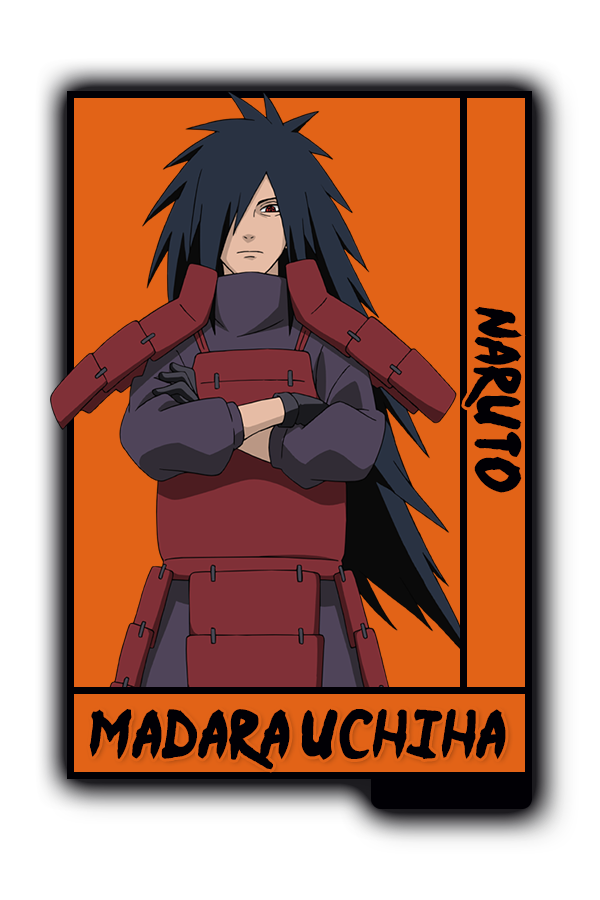
<style>
.page{position:relative;width:600px;height:900px;background:#e26317}
.page>*{position:absolute;margin:0}
.t1{font:52px "Ninja-Naruto";color:#010005}
.t2{font:55.4px "Ninja-Naruto";color:#010005}
</style>
<div class="page">
<p class="t1" style="left:464px;top:307px;width:59px;height:186px;rotate:90deg">Naruto</p>
<p class="t2" style="left:89px;top:708px;width:417px;height:62px">Madara Uchiha</p>
</div>
